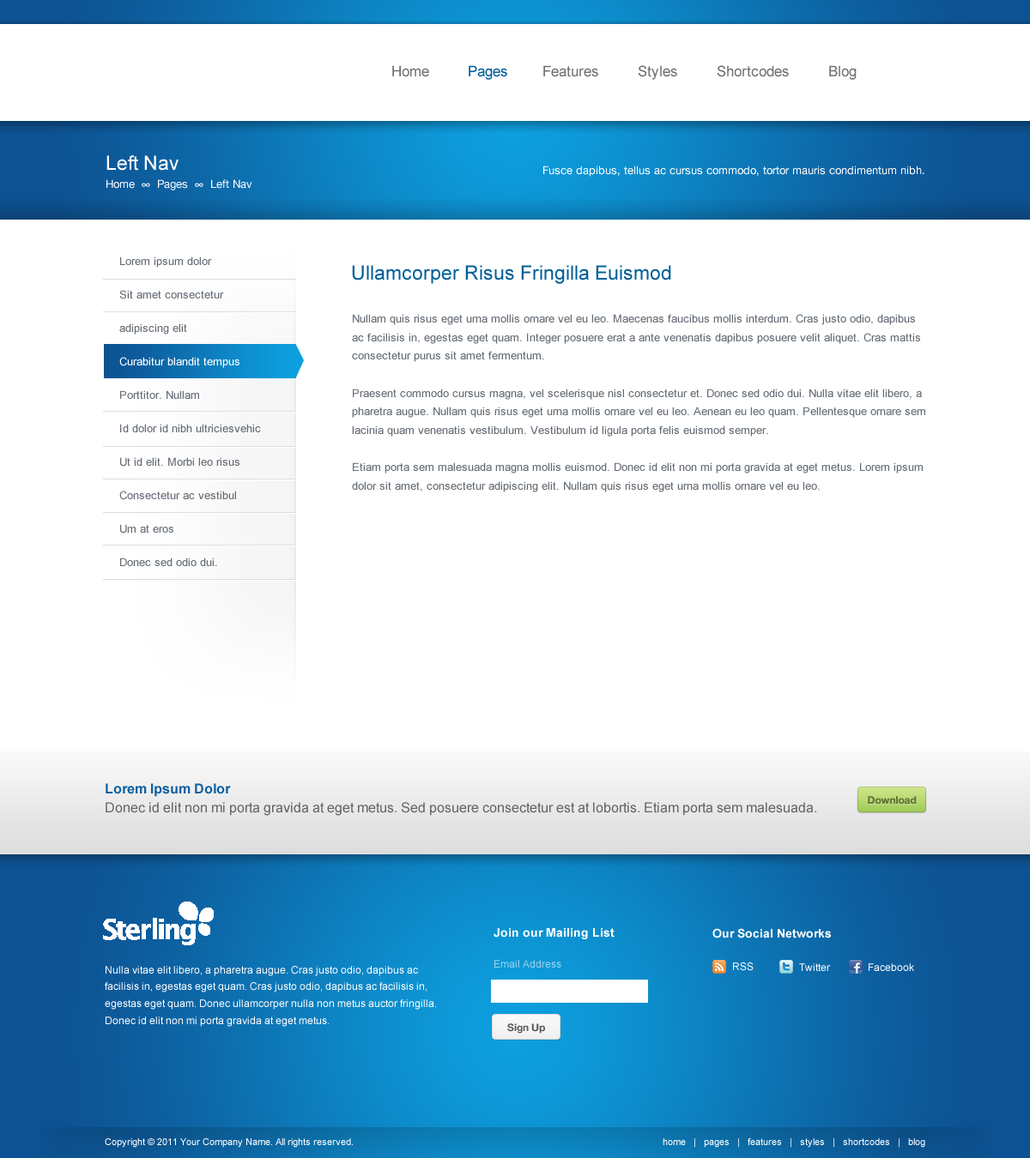
<style>
.page{position:relative;width:1030px;height:1158px;background:#ffffff}
.page>*{position:absolute;margin:0}
.t1{font:14.6px "ArialMT";color:#727272}
.t2{font:14.6px "ArialMT";color:#005f99}
.t3{font:19.7px "ArialMT";color:#ffffff}
.t4{font:11.2px "HelveticaNeue";color:#ffffff}
.t5{font:11.2px/33.5px "ArialMT";color:#636b74}
.t6{font:11.2px/33.5px "ArialMT";color:#ffffff}
.t7{font:19.7px "ArialMT";color:#005f99}
.t8{font:11.2px/18.5px "ArialMT";color:#636b73}
.t9{font:13.7px "Arial-BoldMT";color:#0d60a0}
.t10{font:10.3px "HelveticaNeue-Bold";color:#5d7731}
.t11{font:13.7px "ArialMT";color:#666666}
.t12{font:12px "Arial-BoldMT";color:#ffffff}
.t13{font:10.3px "ArialMT";color:#9ed6ef}
.t14{font:10.3px "ArialMT";color:#ffffff}
.t15{font:10.3px/16.9px "ArialMT";color:#ffffff}
.t16{font:10.3px "HelveticaNeue-Bold";color:#555555}
.t17{font:9.4px "ArialMT";color:#ffffff}
</style>
<div class="page">
<p class="t1" style="left:392px;top:65px;width:464px;height:15px">Home         <span class="t2">Pages</span>        Features         Styles         Shortcodes         Blog</p>
<p class="t3" style="left:106px;top:155px;width:72px;height:16px">Left Nav</p>
<p class="t4" style="left:543px;top:166px;width:381px;height:11px">Fusce dapibus, tellus ac cursus commodo, tortor mauris condimentum nibh.</p>
<p class="t4" style="left:106px;top:179px;width:146px;height:11px">Home  ∞  Pages  ∞  Left Nav</p>
<p class="t5" style="left:119px;top:257px;width:142px;height:309px">Lorem ipsum dolor<br>Sit amet consectetur<br>adipiscing elit<br><span class="t6">Curabitur blandit tempus<br></span>Porttitor. Nullam<br>Id dolor id nibh ultriciesvehic<br>Ut id elit. Morbi leo risus<br>Consectetur ac vestibul<br>Um at eros<br>Donec sed odio dui.</p>
<p class="t7" style="left:352px;top:265px;width:319px;height:19px">Ullamcorper Risus Fringilla Euismod</p>
<p class="t8" style="left:352px;top:314px;width:573px;height:178px">Nullam quis risus eget urna mollis ornare vel eu leo. Maecenas faucibus mollis interdum. Cras justo odio, dapibus ac facilisis in, egestas eget quam. Integer posuere erat a ante venenatis dapibus posuere velit aliquet. Cras mattis consectetur purus sit amet fermentum.<br><br>Praesent commodo cursus magna, vel scelerisque nisl consectetur et. Donec sed odio dui. Nulla vitae elit libero, a pharetra augue. Nullam quis risus eget urna mollis ornare vel eu leo. Aenean eu leo quam. Pellentesque ornare sem lacinia quam venenatis vestibulum. Vestibulum id ligula porta felis euismod semper.<br><br>Etiam porta sem malesuada magna mollis euismod. Donec id elit non mi porta gravida at eget metus. Lorem ipsum dolor sit amet, consectetur adipiscing elit. Nullam quis risus eget urna mollis ornare vel eu leo.</p>
<p class="t9" style="left:106px;top:783px;width:125px;height:14px">Lorem Ipsum Dolor</p>
<p class="t10" style="left:867px;top:796px;width:49px;height:9px">Download</p>
<p class="t11" style="left:106px;top:802px;width:710px;height:14px">Donec id elit non mi porta gravida at eget metus. Sed posuere consectetur est at lobortis. Etiam porta sem malesuada.</p>
<p class="t12" style="left:493px;top:928px;width:121px;height:11px">Join our Mailing List</p>
<p class="t12" style="left:712px;top:928px;width:118px;height:11px">Our Social Networks</p>
<p class="t13" style="left:494px;top:960px;width:67px;height:8px">Email Address</p>
<p class="t14" style="left:733px;top:963px;width:20px;height:8px">RSS</p>
<p class="t14" style="left:799px;top:963px;width:31px;height:8px">Twitter</p>
<p class="t14" style="left:868px;top:963px;width:46px;height:8px">Facebook</p>
<p class="t15" style="left:105px;top:966px;width:331px;height:61px">Nulla vitae elit libero, a pharetra augue. Cras justo odio, dapibus ac facilisis in, egestas eget quam. Cras justo odio, dapibus ac facilisis in, egestas eget quam. Donec ullamcorper nulla non metus auctor fringilla.<br>Donec id elit non mi porta gravida at eget metus.</p>
<p class="t16" style="left:507px;top:1024px;width:38px;height:10px">Sign Up</p>
<p class="t17" style="left:105px;top:1138px;width:248px;height:10px">Copyright © 2011 Your Company Name. All rights reserved.</p>
<p class="t17" style="left:662px;top:1138px;width:263px;height:10px">home   |   pages   |   features   |   styles   |   shortcodes   |   blog</p>
</div>
